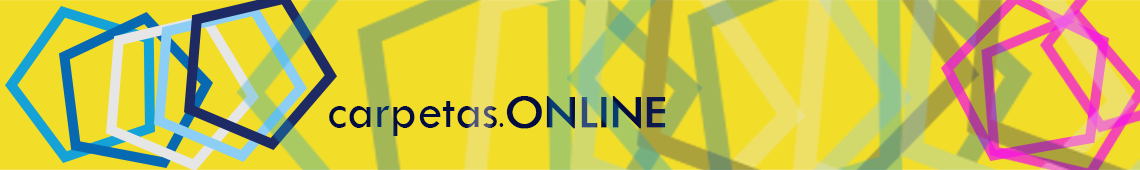
<style>
.page{position:relative;width:1140px;height:170px;background:#f2dd29}
.page>*{position:absolute;margin:0}
.t1{font:49px "TwCenMT-Regular";color:#020c3f}
.t2{font:27px "TwCenMT-Regular";color:#020c3f}
.t3{font:49px "TwCenMT-Regular";color:#020c3f;font-weight:bold}
</style>
<div class="page">
<p class="t1" style="left:329px;top:96px;width:337px;height:40px">carpetas<span class="t2">.</span><span class="t3">ONLINE</span></p>
</div>
